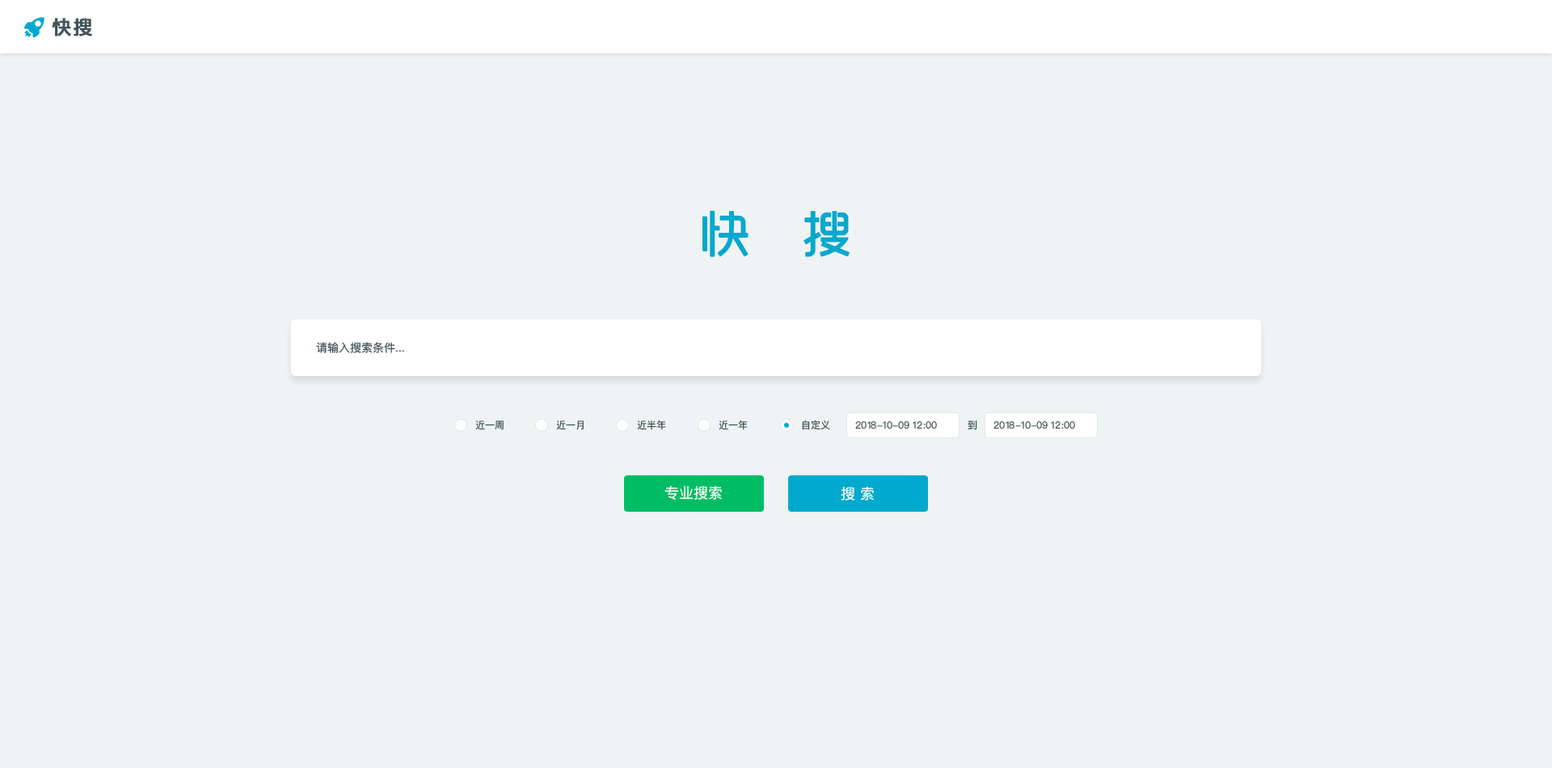
<style>
.page{position:relative;width:1552px;height:768px;background:#eff3f4}
.page>*{position:absolute;margin:0}
.t1{font:19.4px "PingFangSC-Semibold";letter-spacing:0.05em;color:#405459;font-weight:bold}
.t2{font:48.5px "MFYueHei_Noncommercial-Regular";letter-spacing:0.05em;color:#00a9cd;font-weight:bold}
.t3{font:11.3px "PingFangSC-Regular";color:#405459}
.t4{font:9.7px "PingFangSC-Regular";color:#405459}
.t5{font:14.6px "PingFangSC-Regular";color:#ffffff}
</style>
<div class="page">
<p class="t1" style="left:52px;top:18px;width:40px;height:18px">快搜</p>
<p class="t2" style="left:703px;top:210px;width:147px;height:47px">快   搜</p>
<p class="t3" style="left:316px;top:342px;width:88px;height:11px">请输入搜索条件...</p>
<p class="t4" style="left:475px;top:420px;width:29px;height:10px">近一周</p>
<p class="t4" style="left:556px;top:420px;width:28px;height:10px">近一月</p>
<p class="t4" style="left:637px;top:420px;width:29px;height:10px">近半年</p>
<p class="t4" style="left:719px;top:420px;width:29px;height:10px">近一年</p>
<p class="t4" style="left:802px;top:420px;width:28px;height:10px">自定义</p>
<p class="t4" style="left:855px;top:421px;width:82px;height:8px">2018-10-09 12:00</p>
<p class="t4" style="left:968px;top:420px;width:10px;height:10px">到</p>
<p class="t4" style="left:994px;top:421px;width:81px;height:8px">2018-10-09 12:00</p>
<p class="t5" style="left:665px;top:486px;width:57px;height:14px">专业搜索</p>
<p class="t5" style="left:841px;top:487px;width:33px;height:13px">搜 索</p>
</div>
